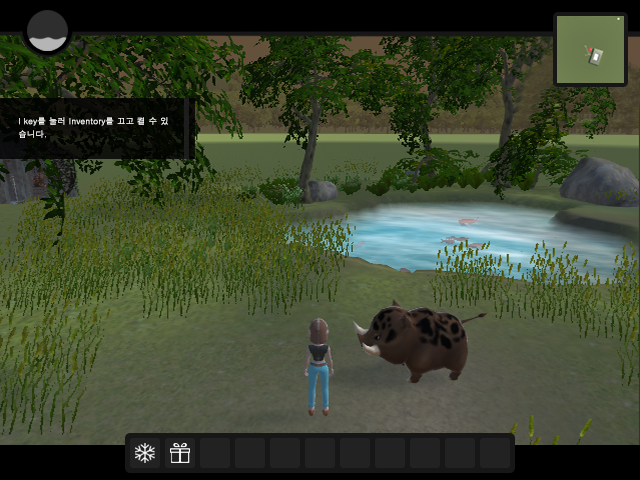
<style>
.page{position:relative;width:640px;height:480px}
.page>*{position:absolute;margin:0}
.t1{font:8.3px/12.5px "Dotum";color:#ffffff;font-weight:bold}
</style>
<div class="page">
<p class="t1" style="left:19px;top:117px;width:149px;height:21px">I key를 눌러 Inventory를 끄고 켤 수 있<br>습니다.</p>
</div>
